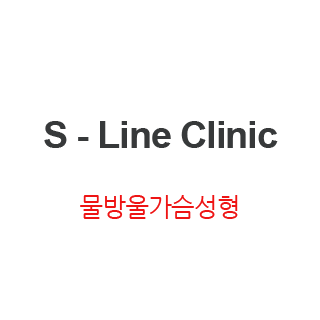
<style>
.page{position:relative;width:320px;height:320px;background:#ffffff}
.page>*{position:absolute;margin:0}
.t1{font:37.5px/33.3px "Arial-BoldMT";letter-spacing:-0.025em;color:#37393a}
.t2{font:37.5px/41.7px "Arial-BoldMT";letter-spacing:-0.025em;color:#37393a}
.t3{font:25px/33.3px "NanumGothic";letter-spacing:-0.025em;color:#ee1414}
</style>
<div class="page">
<p class="t1" style="left:44px;top:121px;width:234px;height:98px;text-align:center"><span class="t2">S </span>- Line Clinic<br><br><span class="t3">물방울가슴성형</span></p>
</div>
